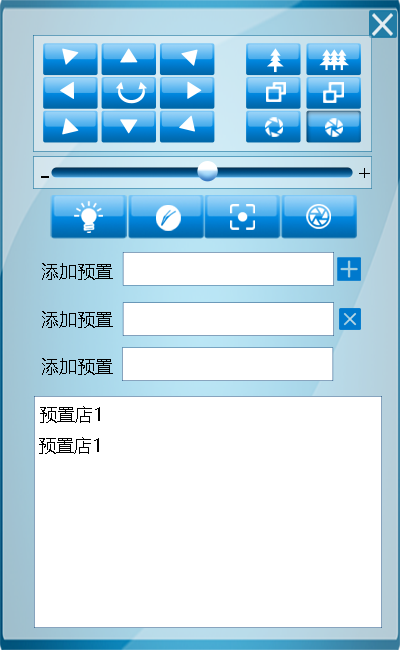
<style>
.page{position:relative;width:400px;height:650px;background:#ffffff}
.page>*{position:absolute;margin:0}
.t1{font:22.2px "MicrosoftYaHeiUILight";color:#000000}
.t2{font:18px "MicrosoftYaHeiUI";color:#000000}
</style>
<div class="page">
<p class="t1" style="left:359px;top:168px;width:11px;height:10px">+</p>
<p class="t2" style="left:42px;top:263px;width:71px;height:17px">添加预置</p>
<p class="t2" style="left:42px;top:311px;width:71px;height:17px">添加预置</p>
<p class="t2" style="left:42px;top:358px;width:71px;height:17px">添加预置</p>
<p class="t2" style="left:40px;top:406px;width:60px;height:17px">预置店1</p>
<p class="t2" style="left:39px;top:437px;width:60px;height:17px">预置店1</p>
</div>
